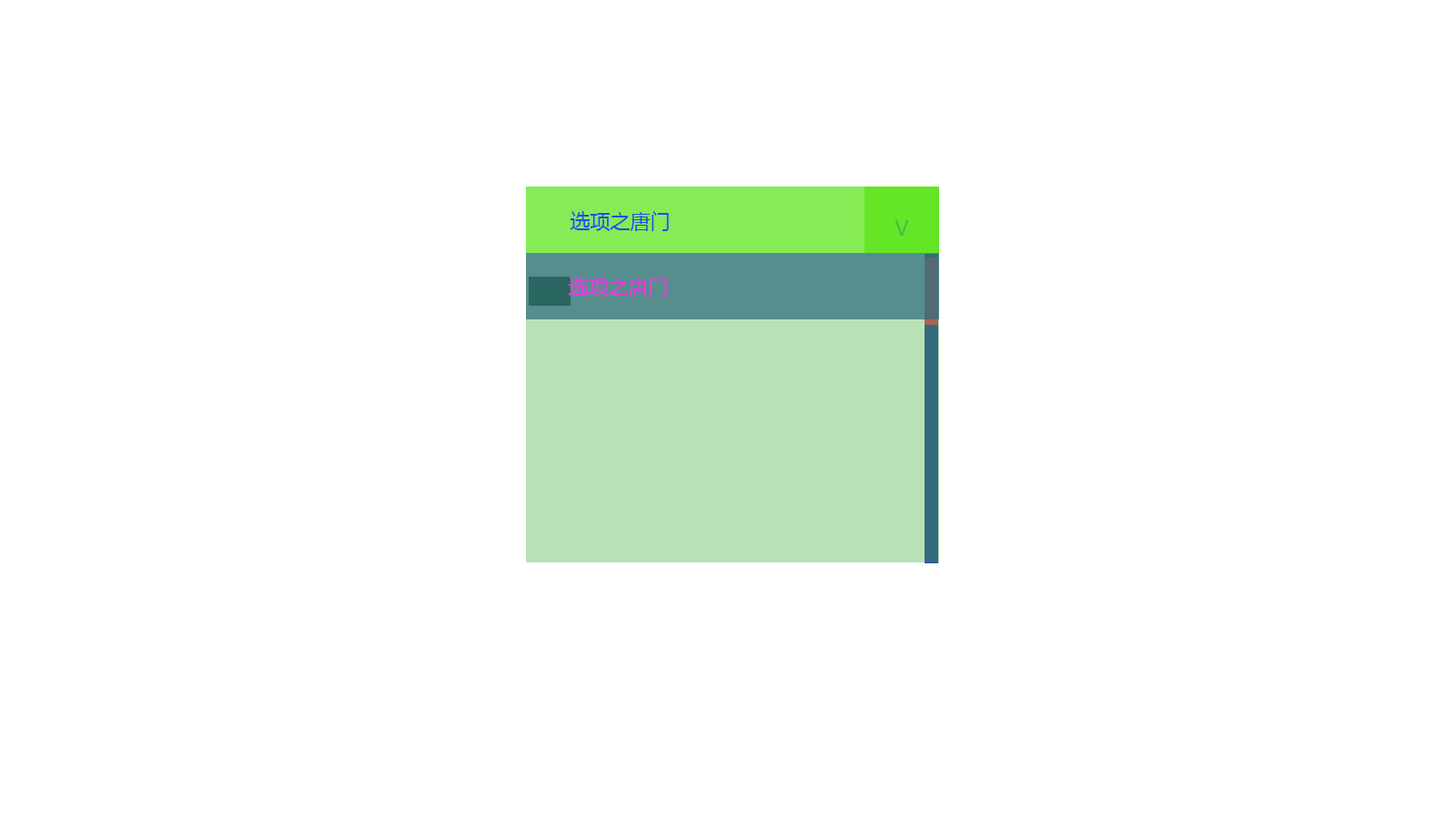
<style>
.page{position:relative;width:1456px;height:819px;background:#ffffff}
.page>*{position:absolute;margin:0}
.t1{font:20px "MicrosoftYaHei";color:#1b50e8}
.t2{font:20px "MicrosoftYaHei";color:#eb35e5}
</style>
<div class="page">
<p class="t1" style="left:570px;top:211px;width:99px;height:20px">选项之唐门</p>
<p class="t2" style="left:568px;top:277px;width:99px;height:20px">选项之唐门</p>
</div>
